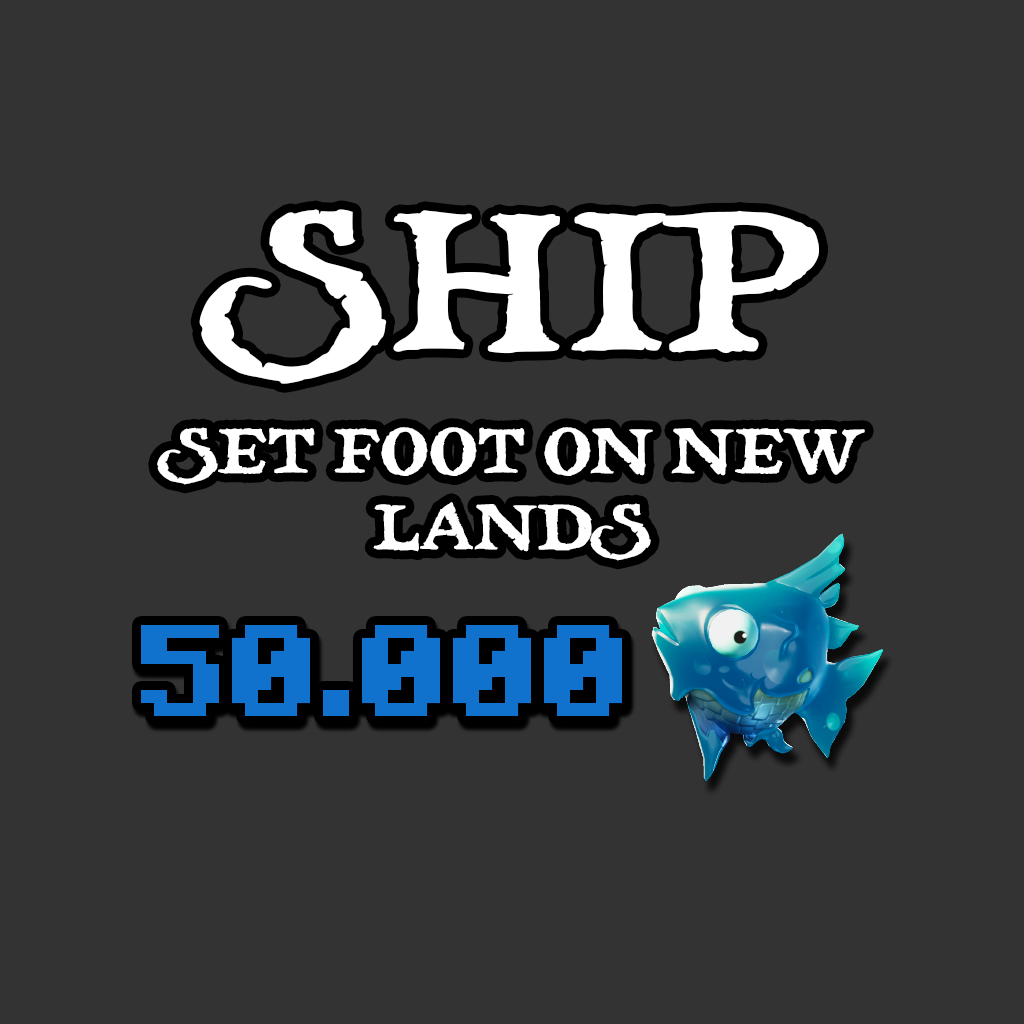
<style>
.page{position:relative;width:1024px;height:1024px;background:#333333}
.page>*{position:absolute;margin:0}
.t1{font:195.5px "treasuremap";color:#ffffff}
.t2{font:63.4px "treasuremap";color:#ffffff}
.t3{font:130px "Minecraft-Bold";color:#1172cd}
</style>
<div class="page">
<p class="t1" style="left:199px;top:209px;width:620px;height:175px">SHIP</p>
<p class="t2" style="left:157px;top:427px;width:708px;height:134px;text-align:center">SET FOOT ON NEW LANDS</p>
<p class="t3" style="left:141px;top:625px;width:481px;height:91px">50.000</p>
</div>
